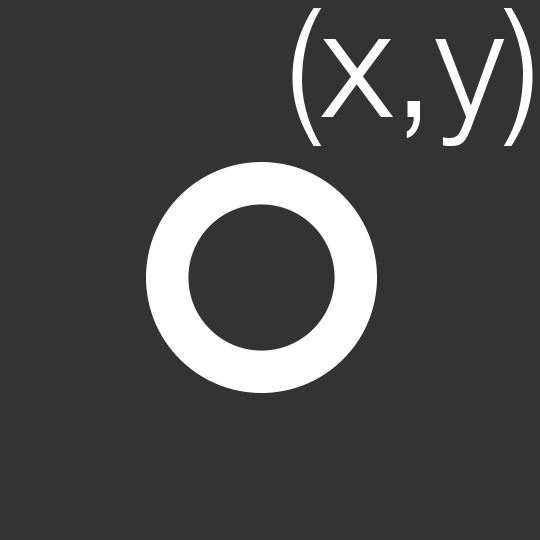
<style>
.page{position:relative;width:540px;height:540px;background:#333333}
.page>*{position:absolute;margin:0}
.t1{font:150px "HelveticaNeueLTPro-Lt";color:#ffffff}
</style>
<div class="page">
<p class="t1" style="left:292px;top:8px;width:241px;height:139px">(x,y)</p>
</div>
